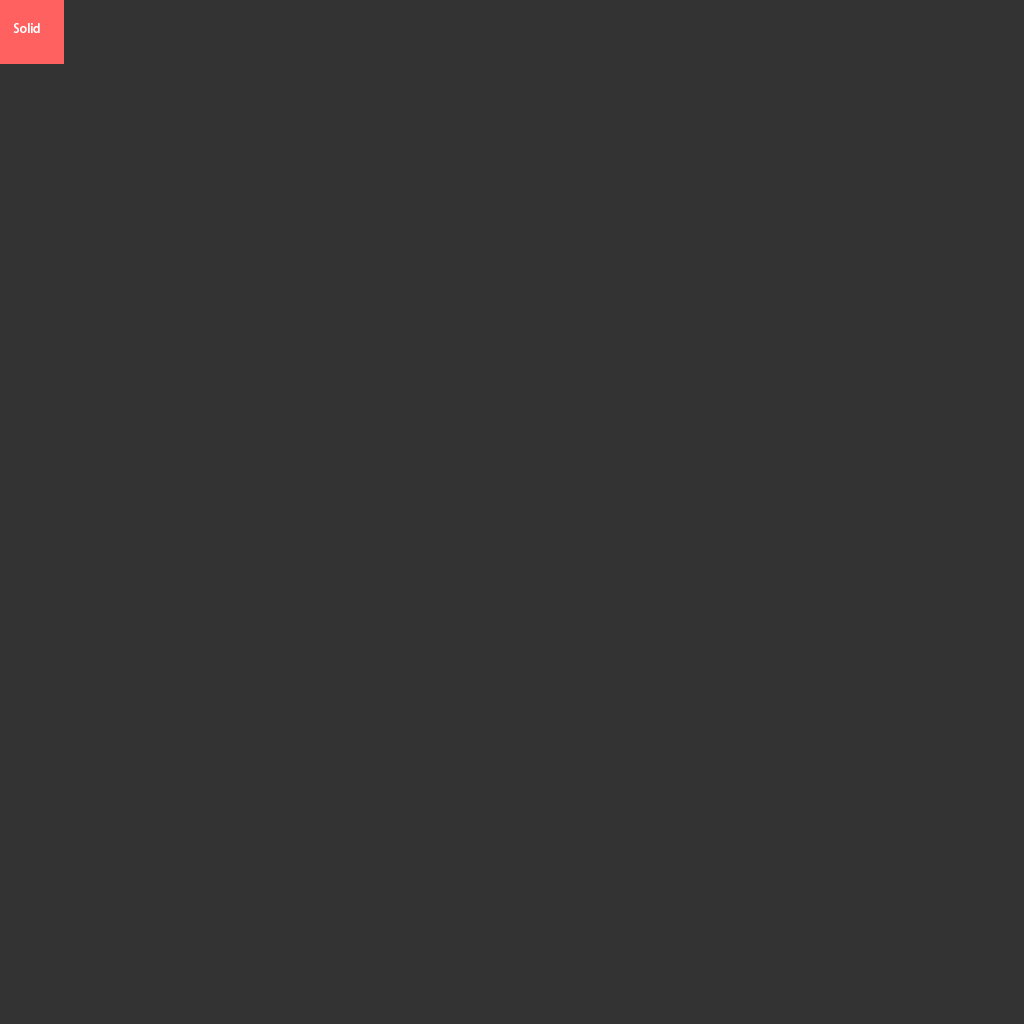
<style>
.page{position:relative;width:1024px;height:1024px;background:#333333}
.page>*{position:absolute;margin:0}
.t1{font:12px "AdobeHeitiStd-Regular";color:#ffffff}
</style>
<div class="page">
<p class="t1" style="left:13px;top:23px;width:27px;height:10px">Solid</p>
</div>
